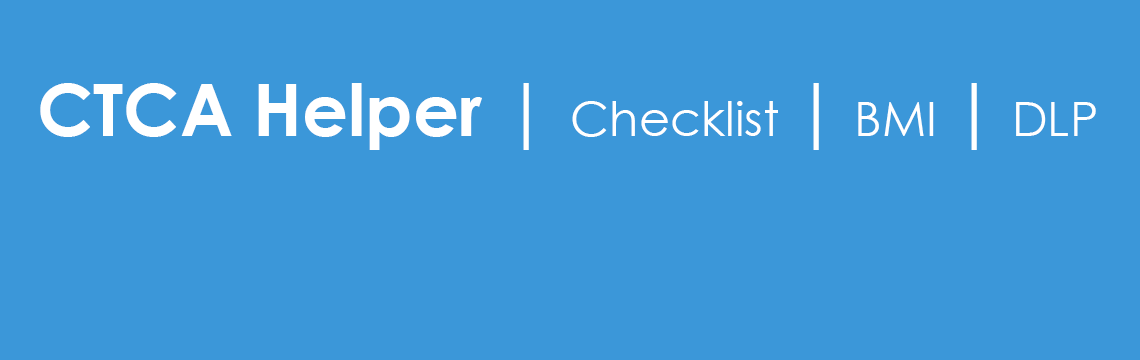
<style>
.page{position:relative;width:1140px;height:360px;background:#3b97d9}
.page>*{position:absolute;margin:0}
.t1{font:72px "CenturyGothic-Bold";color:#ffffff}
.t2{font:72px "CenturyGothic";color:#ffffff}
.t3{font:48px "CenturyGothic";color:#ffffff}
</style>
<div class="page">
<p class="t1" style="left:40px;top:83px;width:1056px;height:67px">CTCA Helper <span class="t2">| </span><span class="t3">Checklist </span><span class="t2">|</span><span class="t3"> BMI </span><span class="t2">|</span><span class="t3"> DLP</span></p>
</div>
